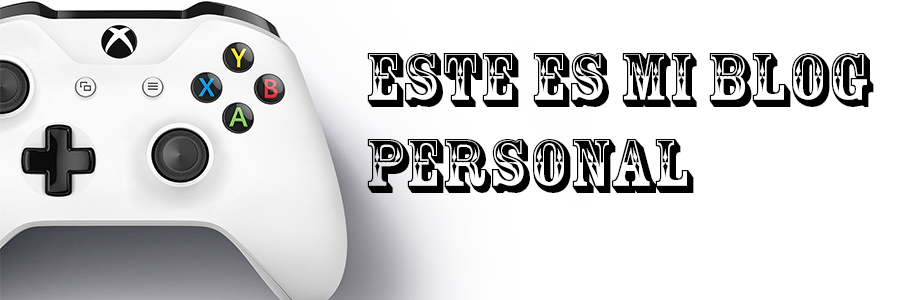
<style>
.page{position:relative;width:900px;height:300px;background:#ffffff}
.page>*{position:absolute;margin:0}
.t1{font:72px "RosewoodStd-Regular";color:#000000}
</style>
<div class="page">
<p class="t1" style="left:367px;top:53px;width:507px;height:140px">ESTE ES MI BLOG <br>PERSONAL</p>
</div>
